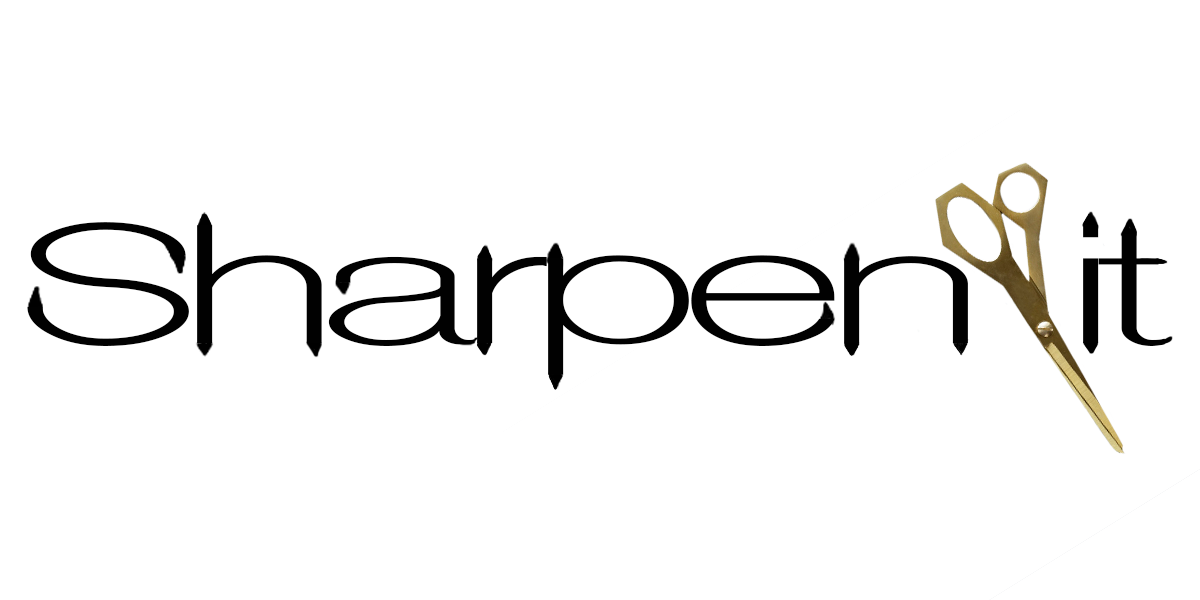
<style>
.page{position:relative;width:1200px;height:600px;background:#ffffff}
.page>*{position:absolute;margin:0}
.t1{font:159.6px "ShreeDev0714";letter-spacing:-0.085em;color:#010101;scale:1.9 1}
</style>
<div class="page">
<p class="t1" style="left:27px;top:222px;width:1138px;height:153px">Sharpen it</p>
</div>
